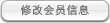
<style>
.page{position:relative;width:110px;height:23px}
.page>*{position:absolute;margin:0}
.t1{font:11px "STXihei";letter-spacing:0.05em;color:#666666}
</style>
<div class="page">
<p class="t1" style="left:20px;top:4px;width:69px;height:12px">修改会员信息</p>
</div>
